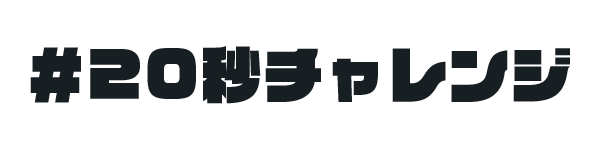
<style>
.page{position:relative;width:600px;height:150px;background:#ffffff}
.page>*{position:absolute;margin:0}
.t1{font:60.8px "VDL-LogoJrBlack-Black";letter-spacing:0.02em;color:#181f23}
</style>
<div class="page">
<p class="t1" style="left:30px;top:46px;width:540px;height:58px">#20秒チャレンジ</p>
</div>
